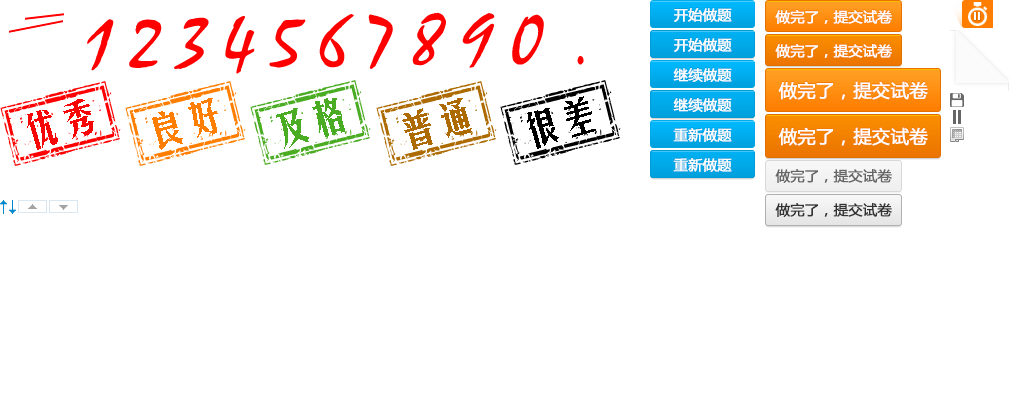
<style>
.page{position:relative;width:1030px;height:400px;background:#ffffff}
.page>*{position:absolute;margin:0}
.t1{font:14px "MicrosoftYaHei";font-weight:bold}
.t2{font:14px "MicrosoftYaHei";color:#fefefe;font-weight:bold}
.t3{font:14px "MicrosoftYaHei";color:#ffffff;font-weight:bold}
.t4{font:72px "Mistral";letter-spacing:0.1em;color:#ff0000;font-style:italic}
.t5{font:18px "MicrosoftYaHei";font-weight:bold}
.t6{font:18px "MicrosoftYaHei";color:#ffffff;font-weight:bold}
.t7{font:39.5px "FZMHJW--GB1-0";color:#f70606}
.t8{font:39.5px "FZMHJW--GB1-0";color:#ff7e00}
.t9{font:39.5px "FZMHJW--GB1-0";color:#4aac22}
.t10{font:39.5px "FZMHJW--GB1-0";color:#ac6a00}
.t11{font:39.5px "FZMHJW--GB1-0";color:#000000}
.t12{font:14px "MicrosoftYaHei";color:#666666;font-weight:bold}
.t13{font:14px "MicrosoftYaHei";color:#333333;font-weight:bold}
</style>
<div class="page">
<p class="t1" style="left:674px;top:7px;width:58px;height:14px">开始做题</p>
<p class="t2" style="left:674px;top:8px;width:58px;height:14px">开始做题</p>
<p class="t1" style="left:775px;top:9px;width:117px;height:14px">做完了，提交试卷</p>
<p class="t3" style="left:775px;top:10px;width:117px;height:14px">做完了，提交试卷</p>
<p class="t1" style="left:674px;top:37px;width:58px;height:14px">开始做题</p>
<p class="t2" style="left:674px;top:38px;width:58px;height:14px">开始做题</p>
<p class="t1" style="left:775px;top:43px;width:117px;height:14px">做完了，提交试卷</p>
<p class="t3" style="left:775px;top:44px;width:117px;height:14px">做完了，提交试卷</p>
<p class="t4" style="left:577px;top:56px;width:7px;height:9px">.</p>
<p class="t1" style="left:673px;top:67px;width:59px;height:14px">继续做题</p>
<p class="t2" style="left:673px;top:68px;width:59px;height:14px">继续做题</p>
<p class="t5" style="left:778px;top:80px;width:150px;height:19px">做完了，提交试卷</p>
<p class="t6" style="left:778px;top:81px;width:150px;height:19px">做完了，提交试卷</p>
<p class="t7" style="left:27px;top:99px;width:67px;height:51px;rotate:-16deg">优秀</p>
<p class="t8" style="left:152px;top:98px;width:66px;height:52px;rotate:-16deg">良好</p>
<p class="t9" style="left:276px;top:98px;width:69px;height:51px;rotate:-16deg">及格</p>
<p class="t10" style="left:402px;top:98px;width:70px;height:52px;rotate:-16deg">普通</p>
<p class="t11" style="left:527px;top:96px;width:69px;height:53px;rotate:-16deg">很差</p>
<p class="t1" style="left:673px;top:97px;width:59px;height:14px">继续做题</p>
<p class="t2" style="left:673px;top:98px;width:59px;height:14px">继续做题</p>
<p class="t5" style="left:778px;top:126px;width:150px;height:19px">做完了，提交试卷</p>
<p class="t1" style="left:673px;top:127px;width:59px;height:14px">重新做题</p>
<p class="t2" style="left:673px;top:128px;width:59px;height:14px">重新做题</p>
<p class="t6" style="left:778px;top:127px;width:150px;height:19px">做完了，提交试卷</p>
<p class="t1" style="left:673px;top:157px;width:59px;height:14px">重新做题</p>
<p class="t2" style="left:673px;top:158px;width:59px;height:14px">重新做题</p>
<p class="t12" style="left:775px;top:169px;width:117px;height:14px">做完了，提交试卷</p>
<p class="t13" style="left:775px;top:203px;width:117px;height:14px">做完了，提交试卷</p>
</div>
